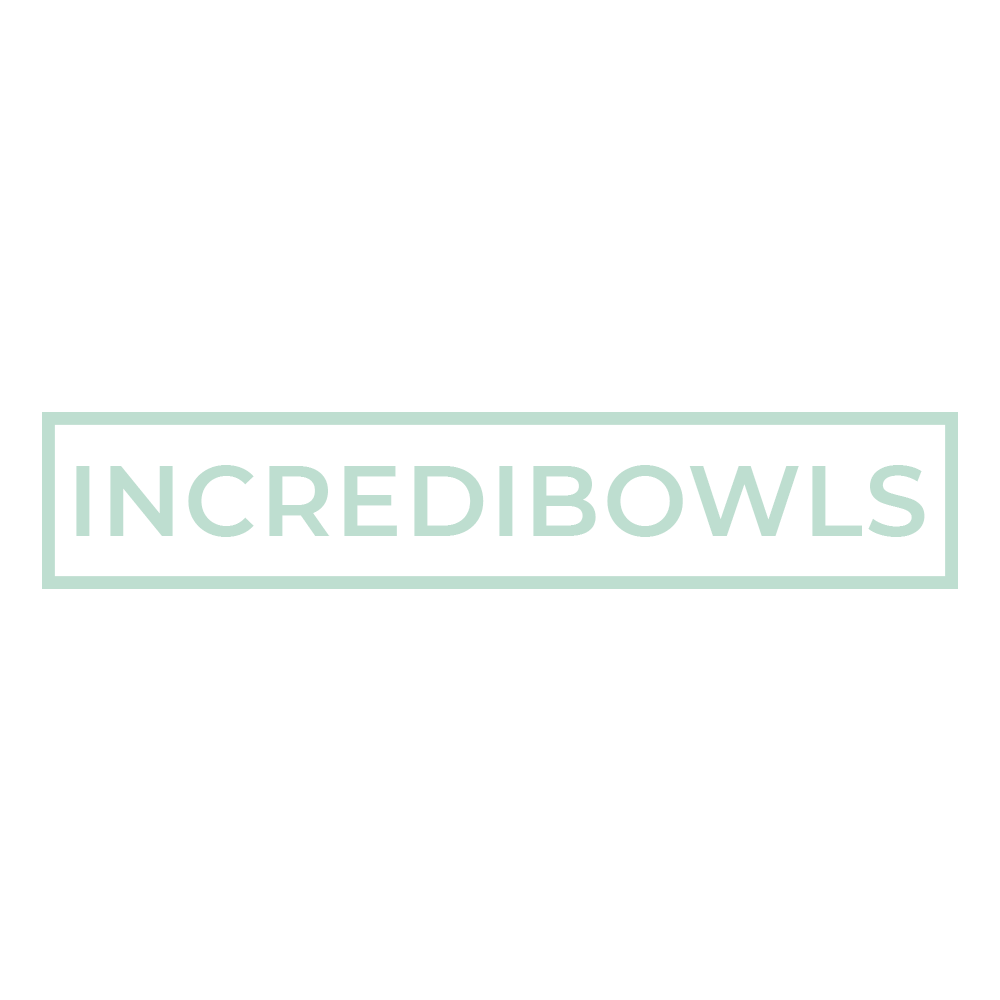
<style>
.page{position:relative;width:1000px;height:1000px;background:#ffffff}
.page>*{position:absolute;margin:0}
.t1{font:100px "Montserrat-SemiBold";letter-spacing:0.025em;color:#beded0}
</style>
<div class="page">
<p class="t1" style="left:76px;top:465px;width:849px;height:72px">INCREDIBOWLS</p>
</div>
